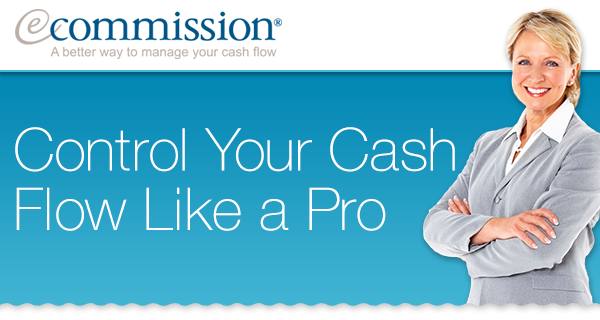
<style>
.page{position:relative;width:600px;height:320px}
.page>*{position:absolute;margin:0}
.t1{font:58.9px/59.4px "HelveticaNeue-Thin";color:#ffffff}
</style>
<div class="page">
<p class="t1" style="left:15px;top:127px;width:440px;height:104px">Control Your Cash<br>Flow Like a Pro</p>
</div>
